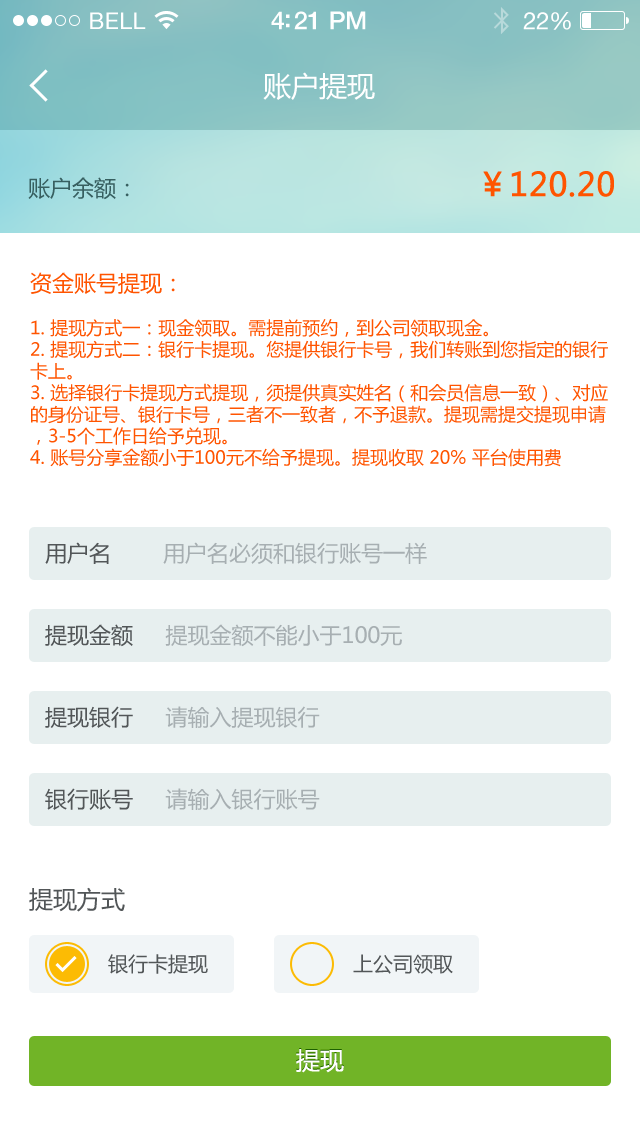
<style>
.page{position:relative;width:640px;height:1136px;background:#ffffff}
.page>*{position:absolute;margin:0}
.t1{font:23px "HelveticaNeue";letter-spacing:0.02em;color:#ffffff}
.t2{font:25px "HelveticaNeue-Medium";letter-spacing:-0.02em;color:#ffffff}
.t3{font:24px "HelveticaNeue";letter-spacing:-0.02em;color:#ffffff}
.t4{font:28px "MicrosoftYaHei";color:#ffffff}
.t5{font:32px "MicrosoftYaHei";color:#ff5400;font-weight:bold}
.t6{font:22px "MicrosoftYaHei";color:#375f60}
.t7{font:18px "MicrosoftYaHei";color:#ff5400}
.t8{font:22px "MicrosoftYaHei";color:#ff5400}
.t9{font:22px "MicrosoftYaHei";color:#a7afb2}
.t10{font:22px "MicrosoftYaHei";color:#525658}
.t11{font:24px "MicrosoftYaHei";color:#525658}
.t12{font:20px "MicrosoftYaHei";color:#525658}
.t13{font:24px "MicrosoftYaHei";color:#ffffff}
</style>
<div class="page">
<p class="t1" style="left:90px;top:12px;width:56px;height:17px">BELL</p>
<p class="t2" style="left:271px;top:11px;width:95px;height:19px">4:21 PM</p>
<p class="t3" style="left:523px;top:12px;width:48px;height:18px">22%</p>
<p class="t4" style="left:263px;top:72px;width:112px;height:28px">账户提现</p>
<p class="t5" style="left:483px;top:171px;width:131px;height:26px">￥120.20</p>
<p class="t6" style="left:28px;top:177px;width:101px;height:23px">账户余额：</p>
<p class="t7" style="left:30px;top:272px;width:578px;height:195px"><span class="t8">资金账号提现：<br></span><br>1. 提现方式一：现金领取。需提前预约，到公司领取现金。<br>2. 提现方式二：银行卡提现。您提供银行卡号，我们转账到您指定的银行卡上。<br>3. 选择银行卡提现方式提现，须提供真实姓名（和会员信息一致）、对应的身份证号、银行卡号，三者不一致者，不予退款。提现需提交提现申请，3-5个工作日给予兑现。<br>4. 账号分享金额小于100元不给予提现。提现收取 20% 平台使用费</p>
<p class="t9" style="left:45px;top:542px;width:382px;height:22px"><span class="t10">用户名    </span>    用户名必须和银行账号一样</p>
<p class="t9" style="left:45px;top:624px;width:357px;height:23px"><span class="t10">提现金额    </span> 提现金额不能小于100元</p>
<p class="t9" style="left:45px;top:706px;width:275px;height:22px"><span class="t10">提现银行    </span> 请输入提现银行</p>
<p class="t9" style="left:45px;top:788px;width:275px;height:22px"><span class="t10">银行账号    </span> 请输入银行账号</p>
<p class="t11" style="left:29px;top:887px;width:96px;height:25px">提现方式</p>
<p class="t12" style="left:108px;top:954px;width:100px;height:20px">银行卡提现</p>
<p class="t12" style="left:353px;top:954px;width:100px;height:20px">上公司领取</p>
<p class="t13" style="left:296px;top:1049px;width:48px;height:24px">提现</p>
</div>
